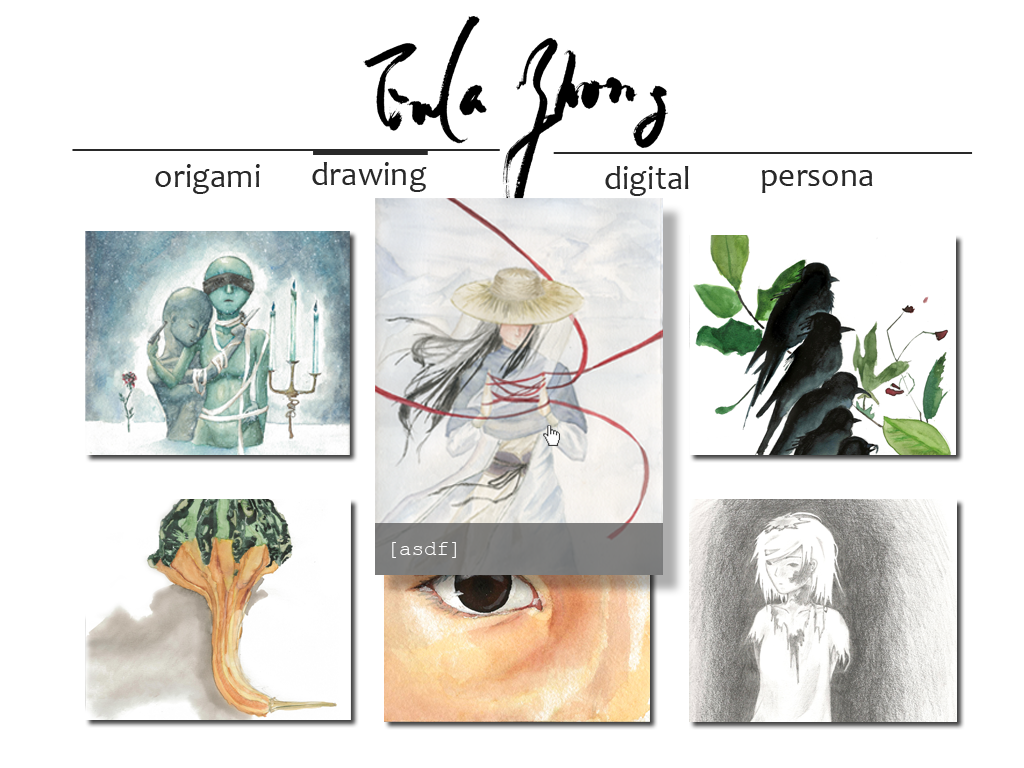
<style>
.page{position:relative;width:1024px;height:768px;background:#ffffff}
.page>*{position:absolute;margin:0}
.t1{font:33.4px "Candara";color:#292929}
.t2{font:20.8px "CourierNewPSMT";color:#ffffff}
</style>
<div class="page">
<p class="t1" style="left:155px;top:164px;width:105px;height:30px">origami</p>
<p class="t1" style="left:312px;top:162px;width:115px;height:30px">drawing</p>
<p class="t1" style="left:605px;top:166px;width:84px;height:30px">digital</p>
<p class="t1" style="left:761px;top:170px;width:112px;height:23px">persona</p>
<p class="t2" style="left:392px;top:542px;width:64px;height:16px">[asdf]</p>
</div>
